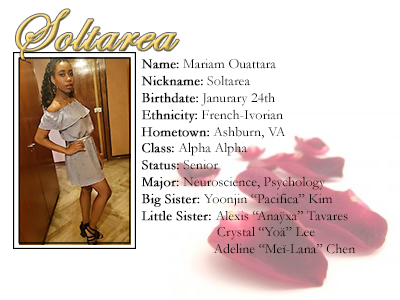
<style>
.page{position:relative;width:400px;height:300px;background:#ffffff}
.page>*{position:absolute;margin:0}
.t1{font:60px "EdwardianScriptITC";font-weight:bold}
.t2{font:14px "Garamond";color:#000000}
.t3{font:14px "Garamond";color:#000000;font-weight:bold}
</style>
<div class="page">
<p class="t1" style="left:16px;top:9px;width:163px;height:51px">Soltarea</p>
<p class="t2" style="left:141px;top:58px;width:215px;height:196px"><span class="t3">Name:</span> Mariam Ouattara<br><span class="t3">Nickname:</span> Soltarea<br><span class="t3">Birthdate:</span> Janurary 24th<br><span class="t3">Ethnicity:</span> French-Ivorian<br><span class="t3">Hometown:</span> Ashburn, VA<br><span class="t3">Class:</span> Alpha Alpha<br><span class="t3">Status:</span> Senior<br><span class="t3">Major:</span> Neuroscience, Psychology<br><span class="t3">Big Sister: </span>Yoonjin “Pacifica” Kim<br><span class="t3">Little Sister: </span>Alexis “Anaÿxa” Tavares<br>   Crystal “Yoä” Lee<br>  Adeline “Meï-Lana” Chen</p>
</div>
